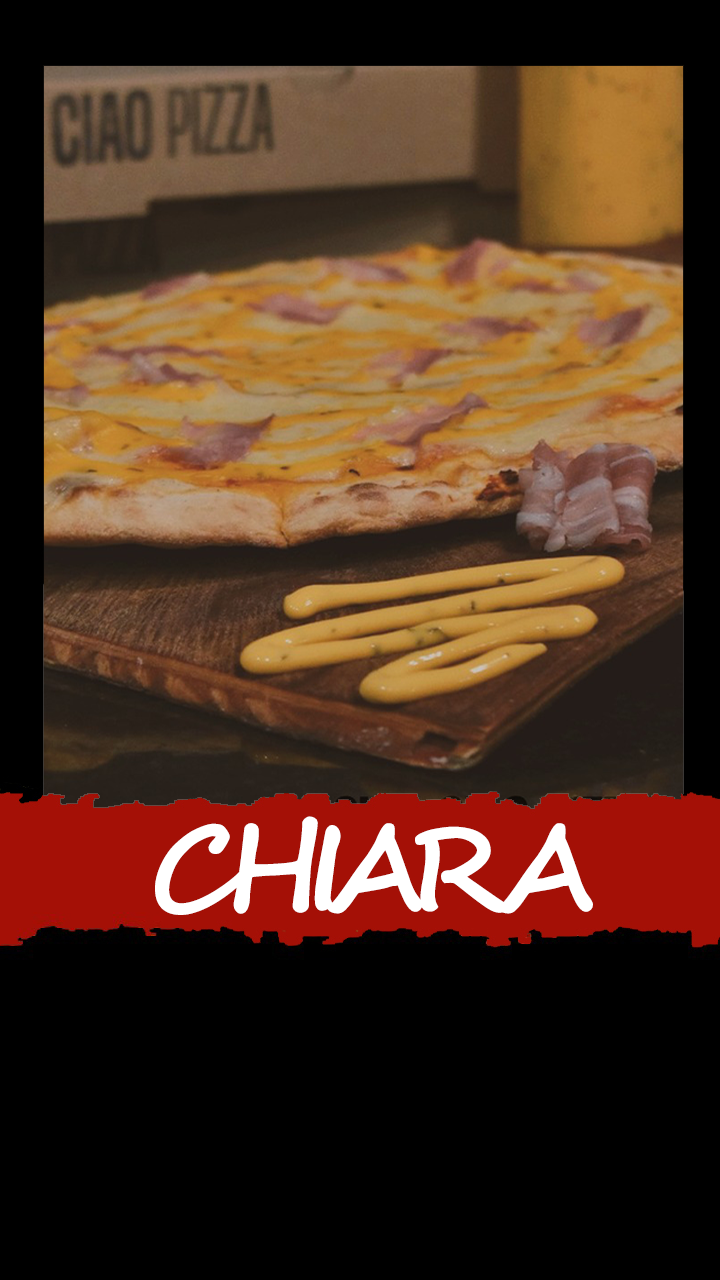
<style>
.page{position:relative;width:720px;height:1280px;background:#000000}
.page>*{position:absolute;margin:0}
.t1{font:118px "SegoeScript-Bold";letter-spacing:-0.12em;color:#ffffff;text-transform:uppercase}
</style>
<div class="page">
<p class="t1" style="left:155px;top:816px;width:438px;height:99px">Chiara</p>
</div>
